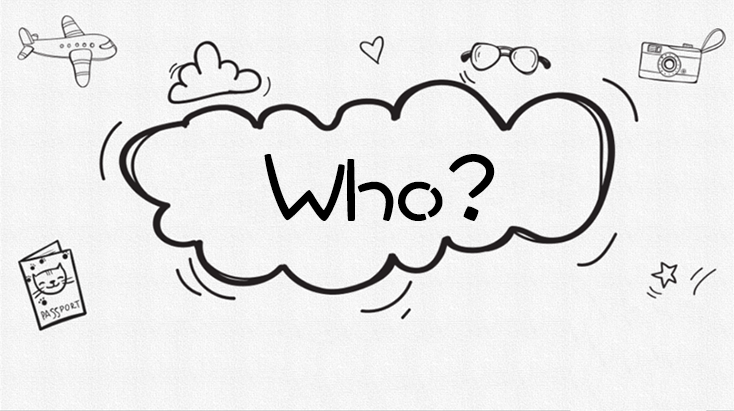
<style>
.page{position:relative;width:734px;height:411px}
.page>*{position:absolute;margin:0}
.t1{font:104.1px "DFPWaWaW5";letter-spacing:-0.025em;color:#000000}
</style>
<div class="page">
<p class="t1" style="left:264px;top:154px;width:231px;height:67px">Who?</p>
</div>
